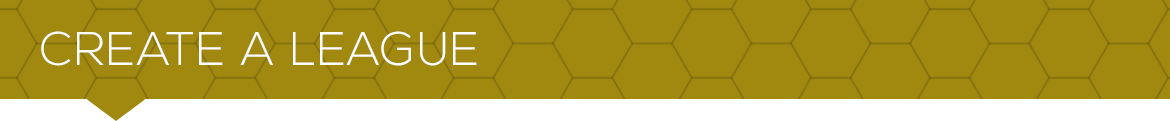
<style>
.page{position:relative;width:1170px;height:121px;background:#a18910}
.page>*{position:absolute;margin:0}
.t1{font:47.2px "NexaLight";letter-spacing:0.03em;color:#ffffff}
</style>
<div class="page">
<p class="t1" style="left:41px;top:31px;width:436px;height:35px">CREATE A LEAGUE</p>
</div>
